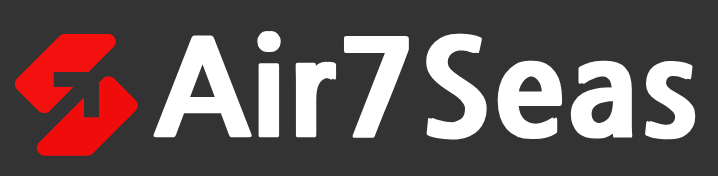
<style>
.page{position:relative;width:718px;height:176px;background:#333333}
.page>*{position:absolute;margin:0}
.t1{font:132px "NanumGothicExtraBold";color:#ffffff;font-weight:bold}
</style>
<div class="page">
<p class="t1" style="left:153px;top:31px;width:543px;height:109px">Air7Seas</p>
</div>
